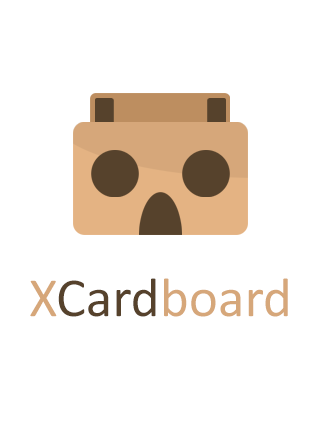
<style>
.page{position:relative;width:320px;height:426px;background:#ffffff}
.page>*{position:absolute;margin:0}
.t1{font:55.2px "Calibri";color:#d6a77a}
.t2{font:55.2px "Calibri";color:#56422c}
</style>
<div class="page">
<p class="t1" style="left:30px;top:278px;width:258px;height:39px">X<span class="t2">Card</span>board</p>
</div>
